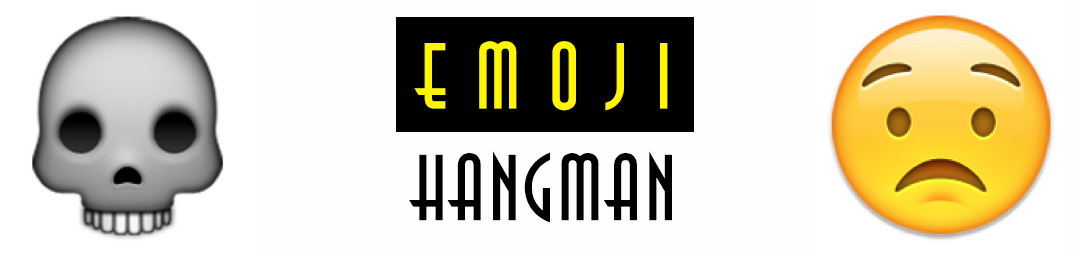
<style>
.page{position:relative;width:1080px;height:256px;background:#fefefe}
.page>*{position:absolute;margin:0}
.t1{font:93px "ITCAnna";letter-spacing:0.025em;color:#000000}
.t2{font:93px "ITCAnna";letter-spacing:0.285em;color:#fff600}
</style>
<div class="page">
<p class="t1" style="left:409px;top:41px;width:263px;height:182px;text-align:center"><span class="t2">EMOJI<br></span>HANGMAN</p>
</div>
